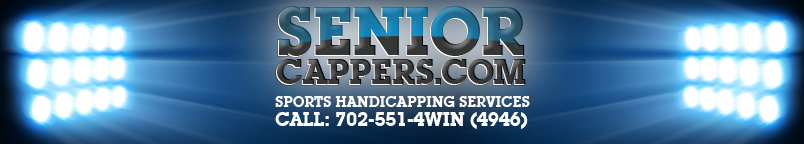
<style>
.page{position:relative;width:804px;height:144px}
.page>*{position:absolute;margin:0}
.t1{font:35px/28.8px "LubalinGraphITCbyBT-Bold";letter-spacing:-0.02em;text-transform:uppercase}
.t2{font:67px/28.8px "LubalinGraphITCbyBT-Bold";letter-spacing:-0.02em;text-transform:uppercase}
.t3{font:15px/28.8px "LubalinGraphITCbyBT-Bold";letter-spacing:-0.02em;color:#ffffff;text-transform:uppercase}
.t4{font:19px/18.8px "LubalinGraphITCbyBT-Bold";letter-spacing:-0.02em;color:#ffffff;text-transform:uppercase}
</style>
<div class="page">
<p class="t1" style="left:277px;top:6px;width:249px;height:78px"><span class="t2">SENIOR<br></span>CAppers.COM</p>
<p class="t1" style="left:276px;top:7px;width:249px;height:78px"><span class="t2">SENIOR<br></span>CAppers.COM</p>
<p class="t3" style="left:275px;top:96px;width:255px;height:33px">sports handicapping services<br><span class="t4">Call: 702-551-4WIN (4946)</span></p>
</div>
